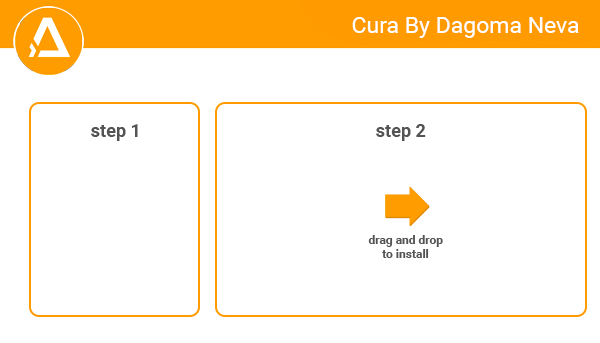
<style>
.page{position:relative;width:600px;height:343px;background:#ffffff}
.page>*{position:absolute;margin:0}
.t1{font:23px "Roboto-Regular";color:#ffffff}
.t2{font:18px "Roboto-Bold";color:#535353}
.t3{font:12px "Roboto-Bold";color:#535353}
</style>
<div class="page">
<p class="t1" style="left:352px;top:17px;width:227px;height:21px">Cura By Dagoma Neva</p>
<p class="t2" style="left:91px;top:124px;width:47px;height:17px">step 1</p>
<p class="t2" style="left:376px;top:124px;width:50px;height:17px">step 2</p>
<p class="t3" style="left:368px;top:235px;width:75px;height:23px;text-align:center">drag and drop<br>to install</p>
</div>
